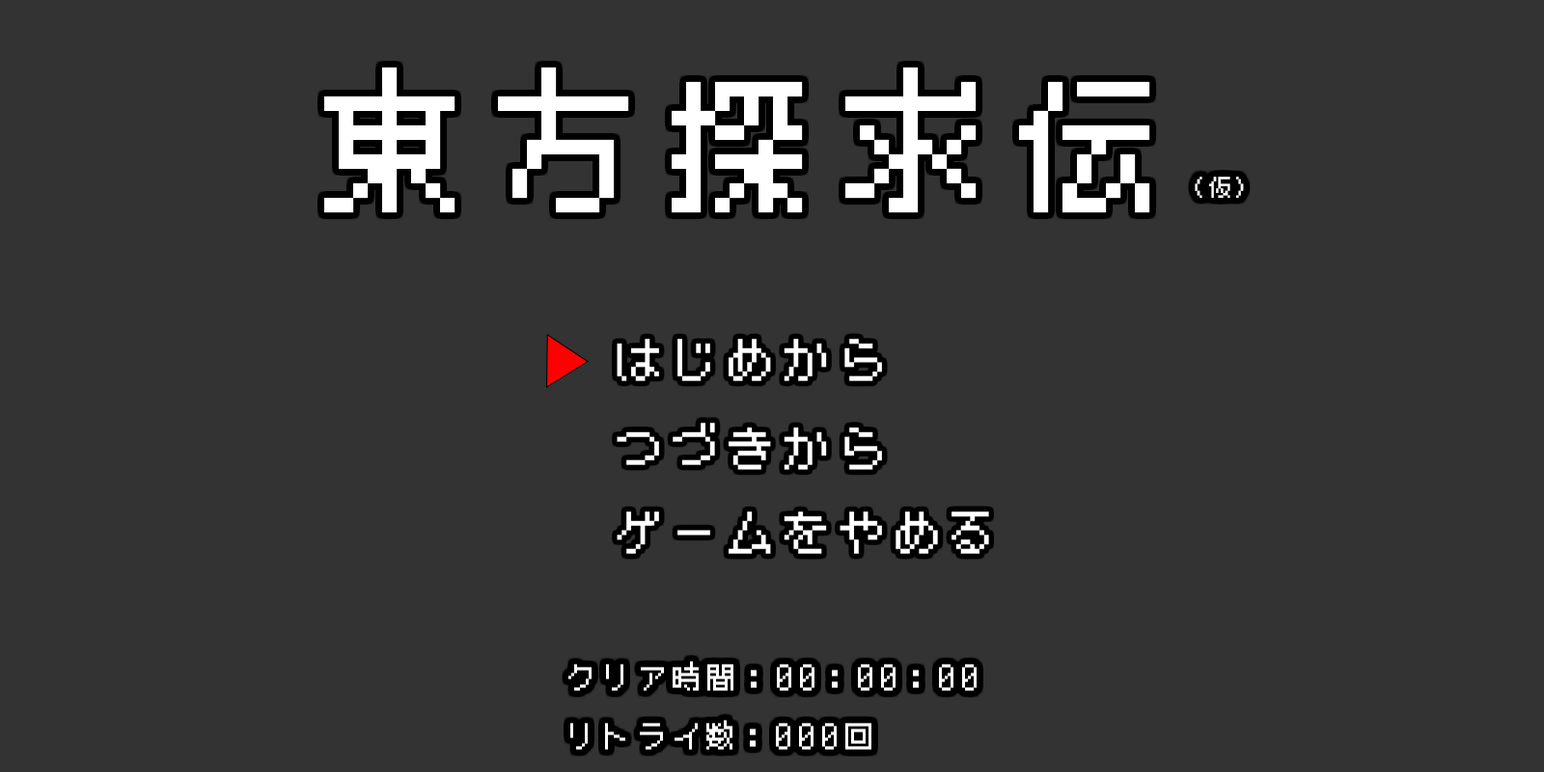
<style>
.page{position:relative;width:1544px;height:772px;background:#333333}
.page>*{position:absolute;margin:0}
.t1{font:144.8px "BestTenDOT";letter-spacing:0.2em;color:#ffffff}
.t2{font:23.2px "BestTenDOT";letter-spacing:0.2em;color:#ffffff}
.t3{font:29px "BestTenDOT";letter-spacing:0.2em;color:#ffffff}
</style>
<div class="page">
<p class="t1" style="left:324px;top:67px;width:920px;height:146px">東方探求伝<span class="t2">(仮)</span></p>
<p class="t3" style="left:568px;top:661px;width:409px;height:30px">クリア時間：00：00：00</p>
<p class="t3" style="left:570px;top:720px;width:302px;height:30px">リトライ数：000回</p>
</div>
